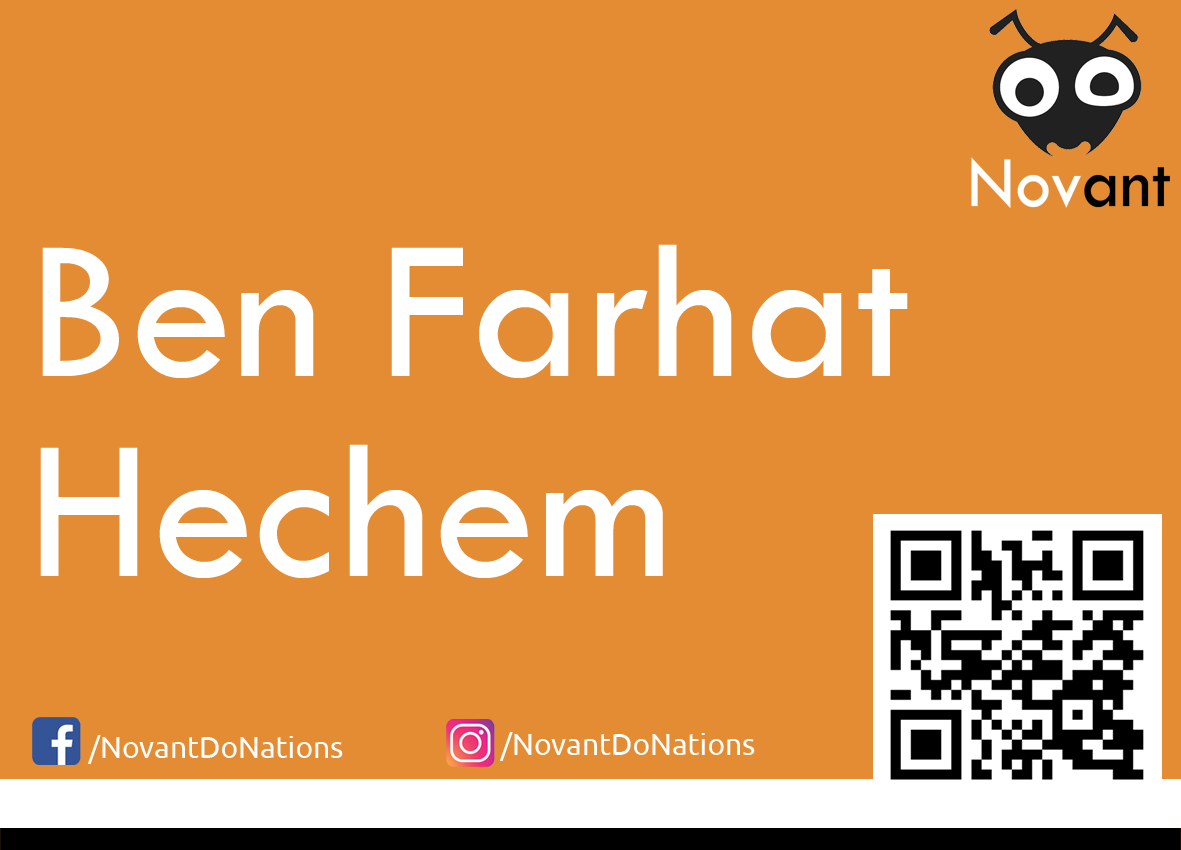
<style>
.page{position:relative;width:1181px;height:850px;background:#e48c34}
.page>*{position:absolute;margin:0}
.t1{font:206.3px/200px "TwCenMT-Regular";color:#ffffff}
.t2{font:30px "Ubuntu";color:#ffffff}
</style>
<div class="page">
<p class="t1" style="left:40px;top:244px;width:868px;height:334px">Ben Farhat<br>Hechem</p>
<p class="t2" style="left:87px;top:735px;width:256px;height:29px">/NovantDoNations</p>
<p class="t2" style="left:499px;top:732px;width:256px;height:29px">/NovantDoNations</p>
</div>
